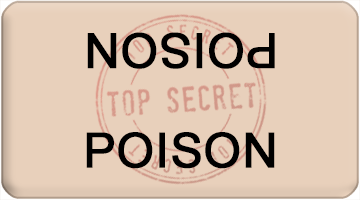
<style>
.page{position:relative;width:360px;height:200px;background:#e8d0bb}
.page>*{position:absolute;margin:0}
.t1{font:48px "ArialMT";color:#000000;font-weight:bold}
</style>
<div class="page">
<p class="t1" style="left:87px;top:32px;width:188px;height:37px;rotate:180deg">POISON</p>
<p class="t1" style="left:86px;top:132px;width:189px;height:37px">POISON</p>
</div>
